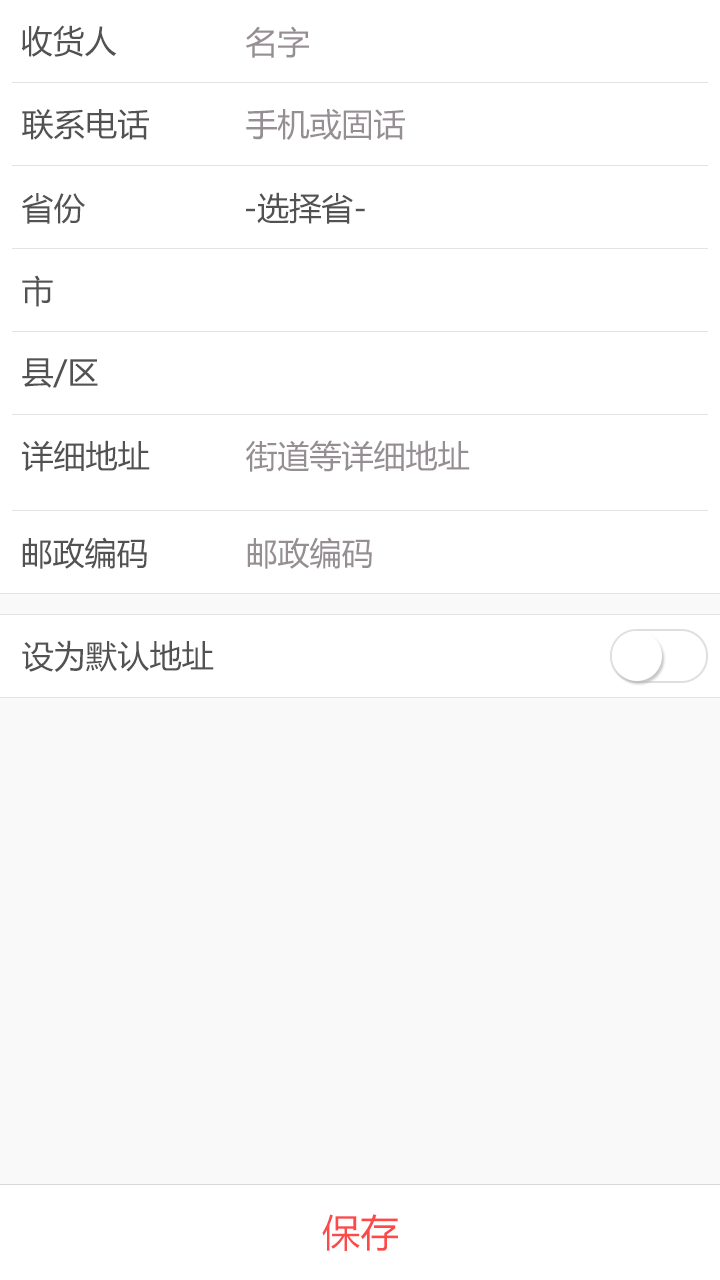
<style>
.page{position:relative;width:720px;height:1280px;background:#ffffff}
.page>*{position:absolute;margin:0}
.t1{font:32px "MicrosoftYaHei";color:#525252}
.t2{font:32px "MicrosoftYaHei";color:#958f93}
.t3{font:38px "MicrosoftYaHei";letter-spacing:0.01em;color:#fc4a4a}
</style>
<div class="page">
<p class="t1" style="left:21px;top:25px;width:96px;height:32px">收货人</p>
<p class="t2" style="left:245px;top:26px;width:64px;height:32px">名字</p>
<p class="t1" style="left:22px;top:109px;width:127px;height:31px">联系电话</p>
<p class="t2" style="left:246px;top:109px;width:159px;height:31px">手机或固话</p>
<p class="t1" style="left:22px;top:193px;width:63px;height:31px">省份</p>
<p class="t1" style="left:246px;top:192px;width:119px;height:32px">-选择省-</p>
<p class="t1" style="left:22px;top:275px;width:31px;height:32px">市</p>
<p class="t1" style="left:22px;top:358px;width:76px;height:30px">县/区</p>
<p class="t1" style="left:22px;top:440px;width:128px;height:32px">详细地址</p>
<p class="t2" style="left:246px;top:440px;width:224px;height:32px">街道等详细地址</p>
<p class="t1" style="left:22px;top:537px;width:125px;height:32px">邮政编码</p>
<p class="t2" style="left:247px;top:537px;width:125px;height:32px">邮政编码</p>
<p class="t1" style="left:22px;top:640px;width:192px;height:32px">设为默认地址</p>
<p class="t3" style="left:322px;top:1214px;width:76px;height:37px">保存</p>
</div>
